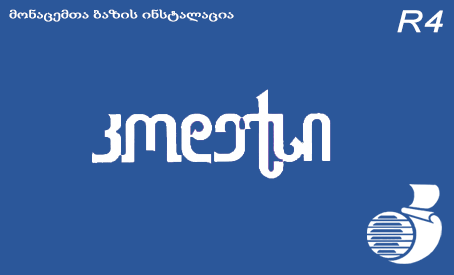
<style>
.page{position:relative;width:454px;height:275px;background:#2b579a}
.page>*{position:absolute;margin:0}
.t1{font:12px "Sylfaen";letter-spacing:0.005em;color:#ffffff;font-weight:bold;scale:1.28 1}
.t2{font:30px "Arial-ItalicMT";letter-spacing:0.005em;color:#ffffff;font-weight:bold;scale:1.2 1}
</style>
<div class="page">
<p class="t1" style="left:9px;top:9px;width:225px;height:13px">მონაცემთა ბაზის ინსტალაცია</p>
<p class="t2" style="left:397px;top:10px;width:46px;height:23px">R4</p>
</div>
